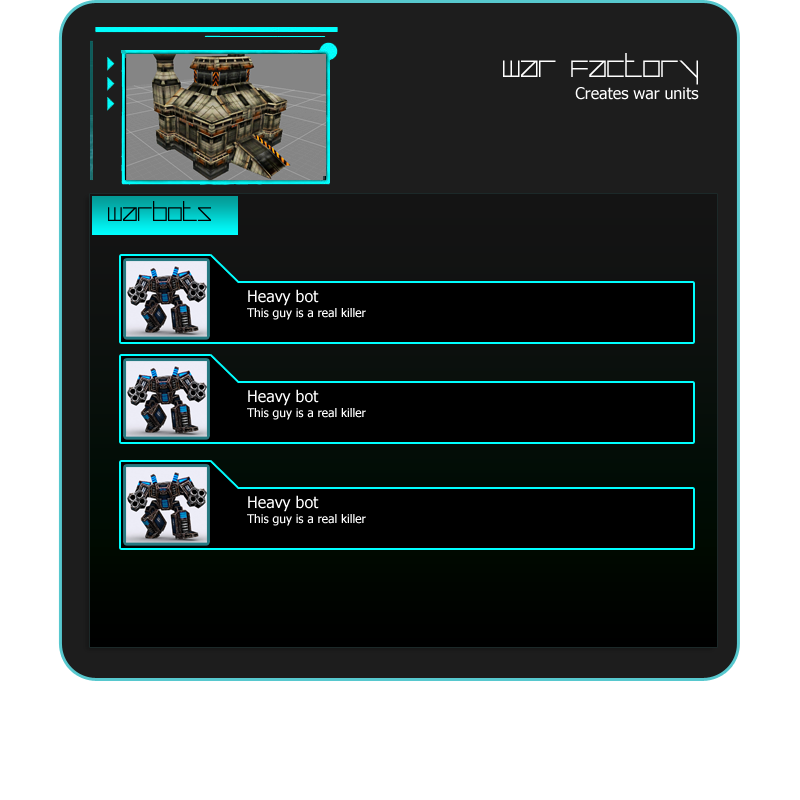
<style>
.page{position:relative;width:800px;height:800px;background:#ffffff}
.page>*{position:absolute;margin:0}
.t1{font:48px "AuricomRegular";color:#ffffff}
.t2{font:16px "Tahoma";color:#ffffff}
.t3{font:40px "AuricomRegular";color:#000000}
.t4{font:12px "Tahoma";color:#ffffff}
</style>
<div class="page">
<p class="t1" style="left:503px;top:53px;width:195px;height:32px">War factory</p>
<p class="t2" style="left:575px;top:87px;width:124px;height:13px">Creates war units</p>
<p class="t3" style="left:108px;top:201px;width:103px;height:20px">WarBots</p>
<p class="t2" style="left:248px;top:289px;width:71px;height:17px">Heavy bot</p>
<p class="t4" style="left:247px;top:308px;width:119px;height:12px">This guy is a real killer</p>
<p class="t2" style="left:248px;top:389px;width:71px;height:17px">Heavy bot</p>
<p class="t4" style="left:247px;top:408px;width:119px;height:12px">This guy is a real killer</p>
<p class="t2" style="left:248px;top:495px;width:71px;height:17px">Heavy bot</p>
<p class="t4" style="left:247px;top:514px;width:119px;height:12px">This guy is a real killer</p>
</div>
